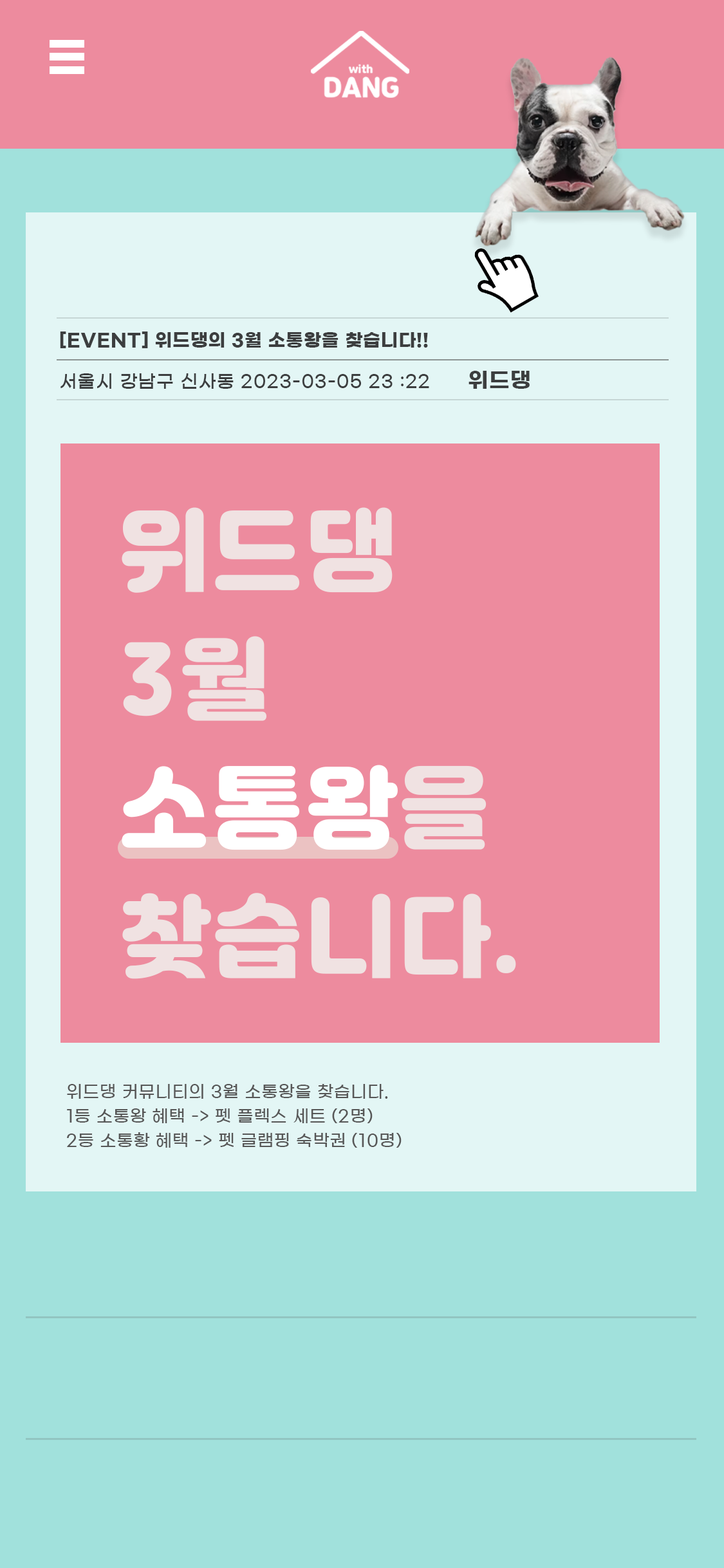
<style>
.page{position:relative;width:724px;height:1568px;background:#ed8b9e}
.page>*{position:absolute;margin:0}
.t1{font:18px/38.6px "GmarketSansTTFMedium";letter-spacing:0.04em;color:#3c3e3f}
.t2{font:17.8px/38.6px "GmarketSansTTFBold";letter-spacing:0.04em;color:#3c3e3f}
.t3{font:21.2px/38.6px "GmarketSansTTFBold";letter-spacing:0.04em;color:#3c3e3f}
.t4{font:89.8px/128.7px "JalnanOTF";letter-spacing:0.04em;color:#f0e2e2}
.t5{font:89.8px/128.7px "JalnanOTF";letter-spacing:0.04em;color:#ffffff}
.t6{font:16.7px/24.2px "GmarketSansTTFMedium";letter-spacing:0.04em;color:#575757}
</style>
<div class="page">
<p class="t1" style="left:60px;top:331px;width:470px;height:58px"><span class="t2">[EVENT] 위드댕의 3월 소통왕을 찾습니다!!<br></span>서울시 강남구 신사동 2023-03-05 23 :22  <span class="t3">위드댕</span></p>
<p class="t4" style="left:122px;top:507px;width:394px;height:472px">위드댕 <br>3월<br><span class="t5">소통왕</span>을<br>찾습니다.</p>
<p class="t6" style="left:67px;top:1084px;width:335px;height:64px">위드댕 커뮤니티의 3월 소통왕을 찾습니다.<br>1등 소통왕 혜택 -&gt; 펫 플렉스 세트 (2명)<br>2등 소통황 혜택 -&gt; 펫 글램핑 숙박권 (10명)</p>
</div>
